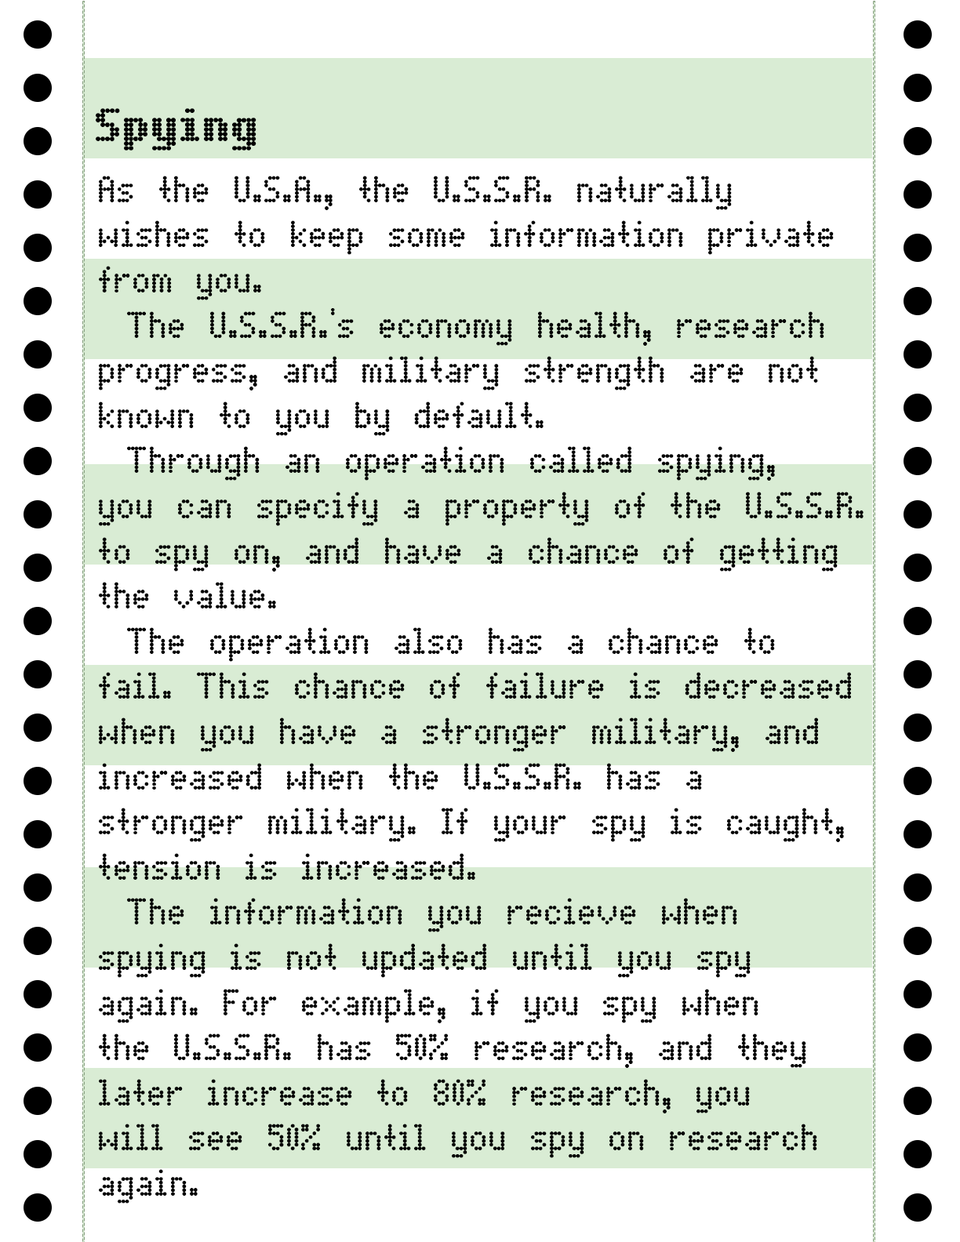
<style>
.page{position:relative;width:960px;height:1242px;background:#ffffff}
.page>*{position:absolute;margin:0}
.t1{font:47.1px "DotMatrixBold";color:#000000}
.t2{font:37.6px "DotMatrix";color:#000000}
</style>
<div class="page">
<p class="t1" style="left:96px;top:108px;width:160px;height:43px">Spying</p>
<p class="t2" style="left:99px;top:176px;width:764px;height:1028px">As the U.S.A., the U.S.S.R. naturally<br>wishes to keep some information private<br>from you.<br> The U.S.S.R.'s economy health, research<br>progress, and military strength are not<br>known to you by default.<br> Through an operation called spying,<br>you can specify a property of the U.S.S.R.<br>to spy on, and have a chance of getting<br>the value.<br> The operation also has a chance to<br>fail. This chance of failure is decreased <br>when you have a stronger military, and<br>increased when the U.S.S.R. has a<br>stronger military. If your spy is caught,<br>tension is increased.<br> The information you recieve when<br>spying is not updated until you spy<br>again. For example, if you spy when<br>the U.S.S.R. has 50% research, and they<br>later increase to 80% research, you<br>will see 50% until you spy on research<br>again.</p>
</div>
